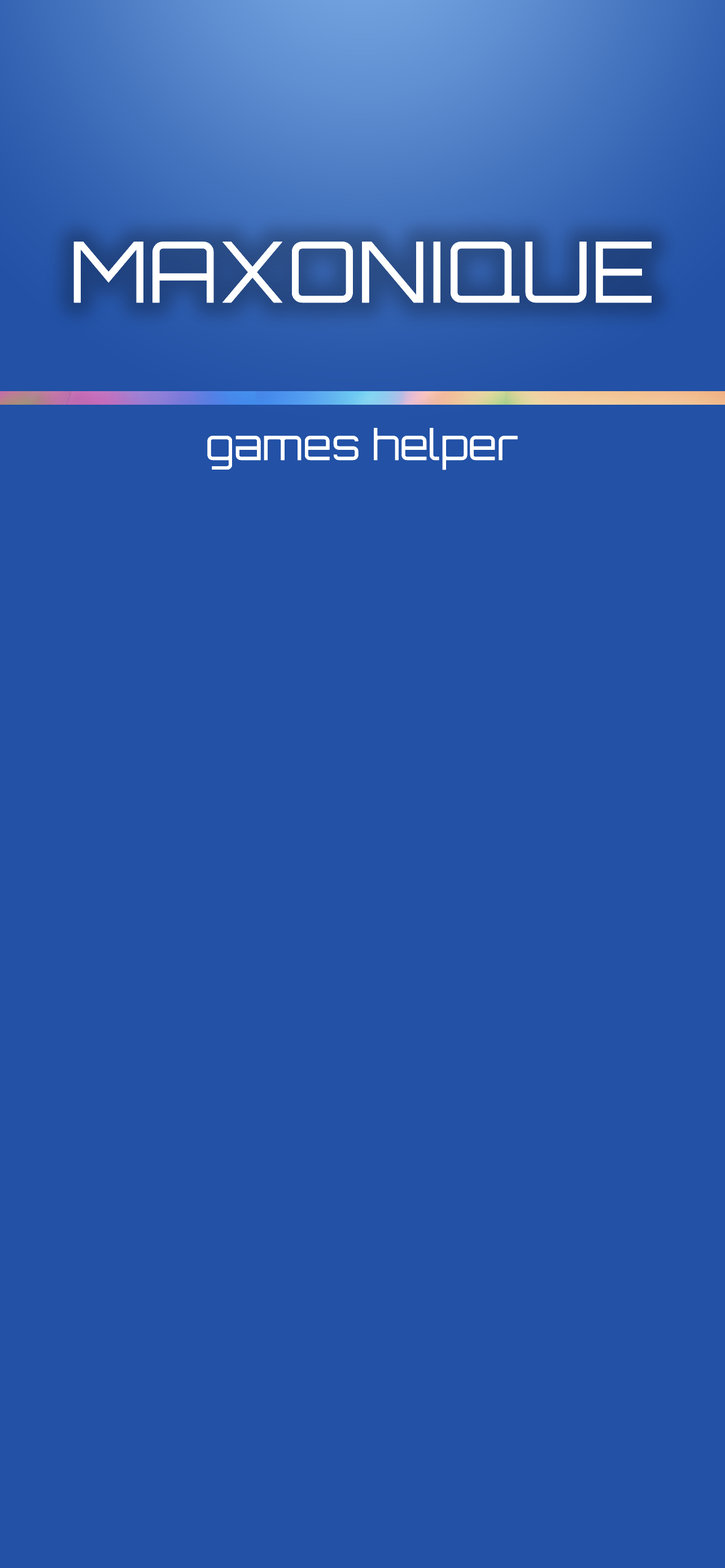
<style>
.page{position:relative;width:725px;height:1568px;background:#2251a6}
.page>*{position:absolute;margin:0}
.t1{font:84.7px "Orbitron-Regular";color:#ffffff}
.t2{font:41.8px "Orbitron-Regular";color:#ffffff}
</style>
<div class="page">
<p class="t1" style="left:73px;top:242px;width:578px;height:61px">MAXONIQUE</p>
<p class="t2" style="left:207px;top:428px;width:311px;height:42px">games helper</p>
</div>
